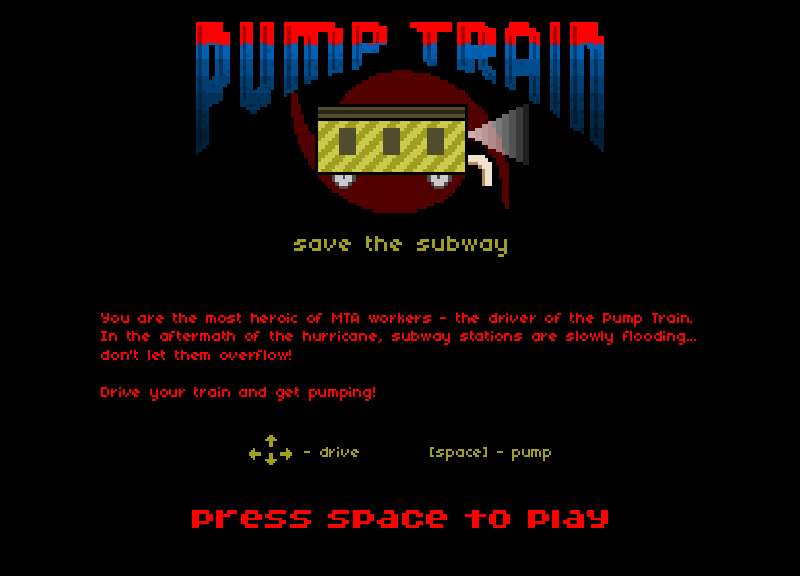
<style>
.page{position:relative;width:800px;height:576px;background:#000000}
.page>*{position:absolute;margin:0}
.t1{font:24px "04b03";color:#9e9e21}
.t2{font:15.5px "04b03";color:#ff0000}
.t3{font:15.5px "04b03";color:#9e9e21}
.t4{font:21px "04b11";color:#ff0000}
</style>
<div class="page">
<p class="t1" style="left:294px;top:236px;width:213px;height:21px">save the subway</p>
<p class="t2" style="left:101px;top:313px;width:595px;height:88px">You are the most heroic of MTA workers - the driver of the Pump Train.<br>In the aftermath of the hurricane, subway stations are slowly flooding... don't let them overflow!<br><br>Drive your train and get pumping!</p>
<p class="t3" style="left:304px;top:447px;width:247px;height:14px">- drive         [space] - pump</p>
<p class="t4" style="left:192px;top:510px;width:416px;height:18px">press space to play</p>
</div>
